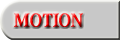
<style>
.page{position:relative;width:120px;height:40px;background:#c8c8c8}
.page>*{position:absolute;margin:0}
.t1{font:18px "MyungjoXB-HM"}
</style>
<div class="page">
<p class="t1" style="left:14px;top:13px;width:69px;height:14px">MOTION</p>
</div>
